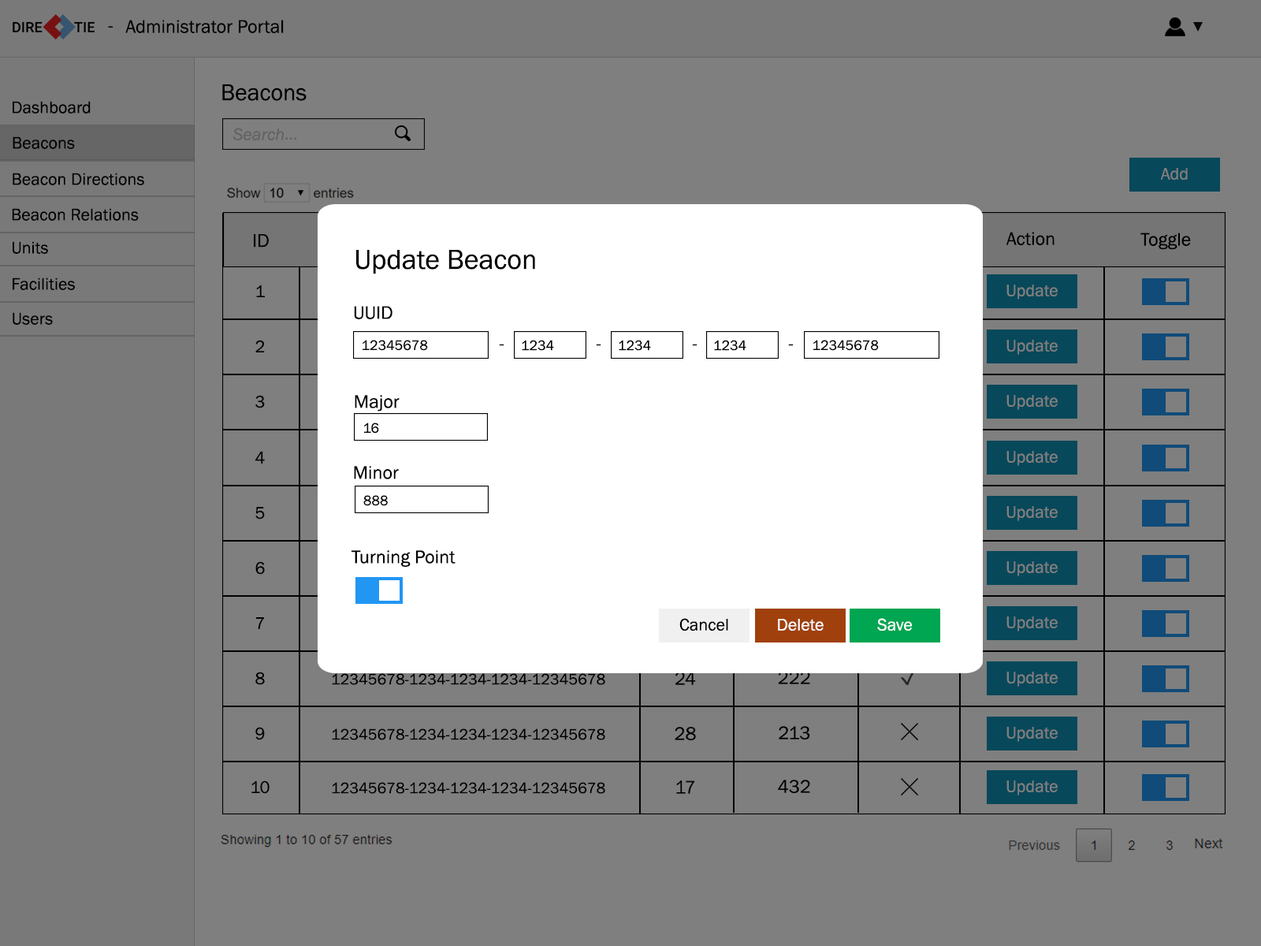
<style>
.page{position:relative;width:1261px;height:946px;background:#7f7f7f}
.page>*{position:absolute;margin:0}
.t1{font:18.9px "FranklinGothic-Book";color:#000000}
.t2{font:23.6px "FranklinGothic-Book";color:#000000}
.t3{font:17.3px "FranklinGothic-Book";color:#000000}
.t4{font:17.3px "FranklinGothic-Book";color:#7f7f7f}
.t5{font:28.4px "FranklinGothic-Book";color:#000000}
.t6{font:14.2px "FranklinGothic-Book";color:#000000}
.t7{font:17.3px "FranklinGothic-Book";color:#010101}
.t8{font:17.3px "FranklinGothic-Book";color:#fefefe}
.t9{font:15.8px "FranklinGothic-Book";color:#000000}
</style>
<div class="page">
<p class="t1" style="left:108px;top:26px;width:5px;height:2px">-</p>
<p class="t1" style="left:125px;top:20px;width:159px;height:13px">Administrator Portal</p>
<p class="t2" style="left:222px;top:84px;width:85px;height:17px">Beacons</p>
<p class="t3" style="left:13px;top:101px;width:78px;height:12px">Dashboard</p>
<p class="t3" style="left:13px;top:136px;width:62px;height:13px">Beacons</p>
<p class="t3" style="left:13px;top:173px;width:131px;height:12px">Beacon Directions</p>
<p class="t4" style="left:1160px;top:168px;width:28px;height:12px">Add</p>
<p class="t3" style="left:12px;top:208px;width:127px;height:13px">Beacon Relations</p>
<p class="t1" style="left:1006px;top:232px;width:48px;height:14px">Action</p>
<p class="t1" style="left:1140px;top:232px;width:51px;height:18px">Toggle</p>
<p class="t3" style="left:13px;top:241px;width:35px;height:13px">Units</p>
<p class="t1" style="left:254px;top:234px;width:15px;height:13px">ID</p>
<p class="t5" style="left:356px;top:250px;width:179px;height:24px">Update Beacon</p>
<p class="t3" style="left:13px;top:277px;width:62px;height:13px">Facilities</p>
<p class="t3" style="left:256px;top:284px;width:9px;height:13px">1</p>
<p class="t4" style="left:1006px;top:284px;width:52px;height:15px">Update</p>
<p class="t1" style="left:354px;top:306px;width:38px;height:13px">UUID</p>
<p class="t3" style="left:13px;top:312px;width:40px;height:13px">Users</p>
<p class="t3" style="left:255px;top:340px;width:10px;height:12px">2</p>
<p class="t6" style="left:363px;top:340px;width:65px;height:11px">12345678</p>
<p class="t6" style="left:522px;top:340px;width:32px;height:11px">1234</p>
<p class="t6" style="left:619px;top:340px;width:32px;height:11px">1234</p>
<p class="t6" style="left:714px;top:340px;width:32px;height:11px">1234</p>
<p class="t6" style="left:813px;top:340px;width:66px;height:11px">12345678</p>
<p class="t4" style="left:1006px;top:340px;width:52px;height:15px">Update</p>
<p class="t1" style="left:499px;top:344px;width:5px;height:2px">-</p>
<p class="t1" style="left:596px;top:344px;width:5px;height:2px">-</p>
<p class="t1" style="left:692px;top:344px;width:5px;height:2px">-</p>
<p class="t1" style="left:788px;top:344px;width:6px;height:2px">-</p>
<p class="t3" style="left:255px;top:395px;width:10px;height:13px">3</p>
<p class="t1" style="left:355px;top:395px;width:45px;height:16px">Major</p>
<p class="t4" style="left:1006px;top:395px;width:52px;height:15px">Update</p>
<p class="t6" style="left:364px;top:422px;width:15px;height:11px">16</p>
<p class="t3" style="left:255px;top:451px;width:10px;height:12px">4</p>
<p class="t4" style="left:1006px;top:451px;width:52px;height:15px">Update</p>
<p class="t1" style="left:354px;top:466px;width:45px;height:13px">Minor</p>
<p class="t6" style="left:363px;top:495px;width:25px;height:11px">888</p>
<p class="t3" style="left:255px;top:507px;width:10px;height:12px">5</p>
<p class="t4" style="left:1006px;top:506px;width:52px;height:15px">Update</p>
<p class="t1" style="left:351px;top:550px;width:105px;height:17px">Turning Point</p>
<p class="t3" style="left:255px;top:561px;width:10px;height:14px">6</p>
<p class="t4" style="left:1006px;top:561px;width:52px;height:15px">Update</p>
<p class="t3" style="left:256px;top:617px;width:8px;height:12px">7</p>
<p class="t7" style="left:679px;top:618px;width:49px;height:12px">Cancel</p>
<p class="t8" style="left:877px;top:618px;width:35px;height:12px">Save</p>
<p class="t4" style="left:1006px;top:616px;width:52px;height:15px">Update</p>
<p class="t8" style="left:778px;top:619px;width:46px;height:11px">Delete</p>
<p class="t3" style="left:255px;top:671px;width:10px;height:14px">8</p>
<p class="t9" style="left:332px;top:673px;width:273px;height:12px">12345678-1234-1234-1234-12345678</p>
<p class="t1" style="left:675px;top:671px;width:21px;height:14px">24</p>
<p class="t1" style="left:778px;top:671px;width:32px;height:13px">222</p>
<p class="t4" style="left:1006px;top:671px;width:52px;height:15px">Update</p>
<p class="t1" style="left:779px;top:726px;width:31px;height:13px">213</p>
<p class="t3" style="left:255px;top:727px;width:10px;height:13px">9</p>
<p class="t9" style="left:332px;top:728px;width:273px;height:12px">12345678-1234-1234-1234-12345678</p>
<p class="t1" style="left:675px;top:727px;width:21px;height:13px">28</p>
<p class="t4" style="left:1006px;top:727px;width:52px;height:15px">Update</p>
<p class="t3" style="left:251px;top:780px;width:19px;height:14px">10</p>
<p class="t9" style="left:332px;top:782px;width:273px;height:12px">12345678-1234-1234-1234-12345678</p>
<p class="t1" style="left:676px;top:780px;width:19px;height:14px">17</p>
<p class="t1" style="left:778px;top:779px;width:32px;height:14px">432</p>
<p class="t4" style="left:1006px;top:780px;width:52px;height:15px">Update</p>
</div>
